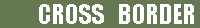
<style>
.page{position:relative;width:200px;height:28px;background:#667852}
.page>*{position:absolute;margin:0}
.t1{font:25px "Impact";color:#ffffff}
</style>
<div class="page">
<p class="t1" style="left:39px;top:4px;width:155px;height:20px">CROSS   BORDER</p>
</div>
